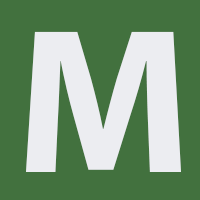
<style>
.page{position:relative;width:200px;height:200px;background:#42713e}
.page>*{position:absolute;margin:0}
.t1{font:208.3px "MyriadPro-Bold";color:#ecedf1}
</style>
<div class="page">
<p class="t1" style="left:26px;top:31px;width:155px;height:141px">M</p>
</div>
